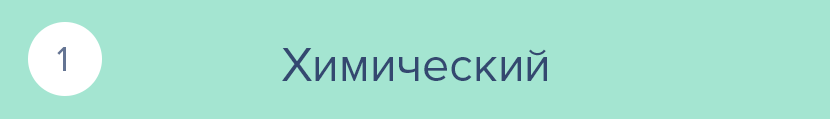
<style>
.page{position:relative;width:830px;height:119px;background:#a4e5d1}
.page>*{position:absolute;margin:0}
.t1{font:36px "ProximaNova-Regular";color:#647493}
.t2{font:48px "ProximaNova-Regular";color:#344870}
</style>
<div class="page">
<p class="t1" style="left:57px;top:47px;width:9px;height:24px">1</p>
<p class="t2" style="left:282px;top:48px;width:265px;height:33px">Химический</p>
</div>
